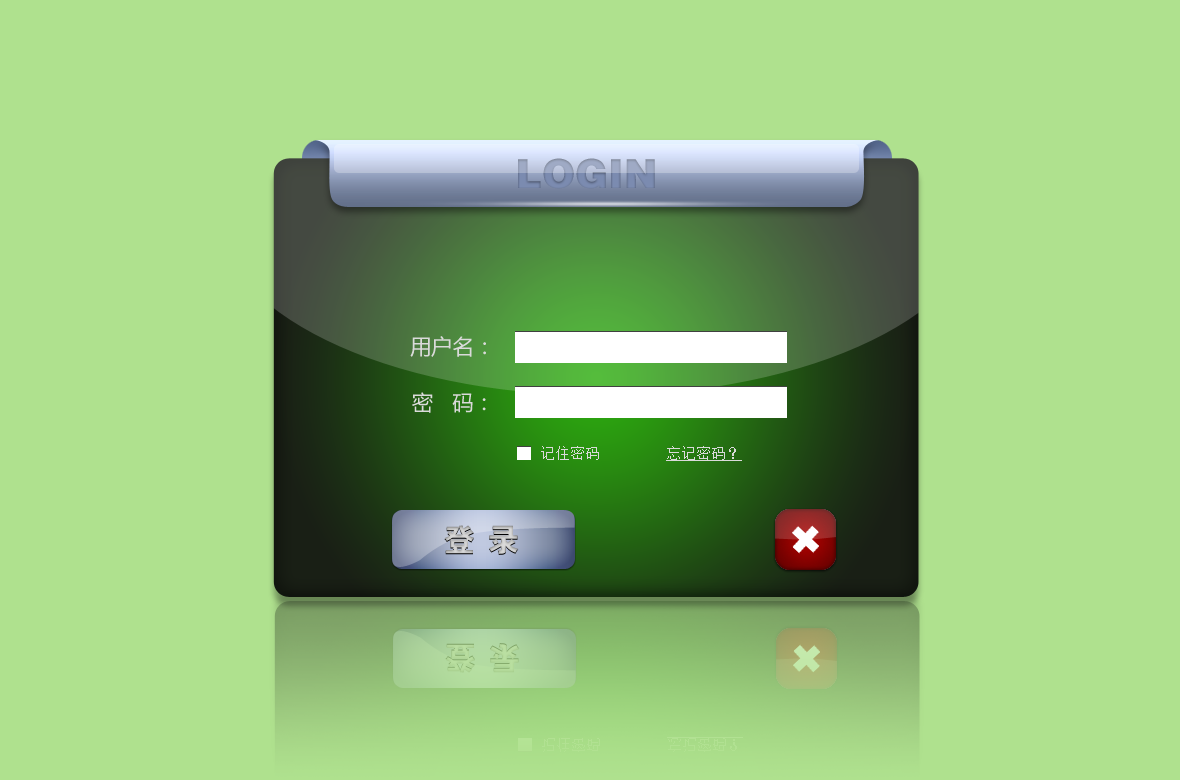
<style>
.page{position:relative;width:1180px;height:780px;background:#afe18e}
.page>*{position:absolute;margin:0}
.t1{font:40px "FZCCHJW--GB1-0"}
.t2{font:21.3px "MicrosoftYaHei";color:#dadada}
.t3{font:14.7px "SimSun";color:#dadada}
.t4{font:14.7px "SimSun";color:#dadada;text-decoration:underline}
</style>
<div class="page">
<p class="t1" style="left:518px;top:158px;width:137px;height:31px">LOGIN</p>
<p class="t2" style="left:410px;top:336px;width:76px;height:21px">用户名：</p>
<p class="t2" style="left:412px;top:392px;width:74px;height:21px">密   码：</p>
<p class="t3" style="left:541px;top:446px;width:58px;height:14px">记住密码</p>
<p class="t4" style="left:666px;top:446px;width:76px;height:15px">忘记密码？</p>
</div>
